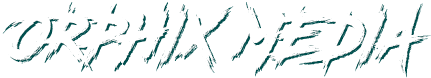
<style>
.page{position:relative;width:431px;height:78px;background:#ffffff}
.page>*{position:absolute;margin:0}
.t1{font:63px "RoadRage";color:#ffffff;scale:0.93 1}
</style>
<div class="page">
<p class="t1" style="left:2px;top:2px;width:429px;height:76px">ORPHIX MEDIA</p>
</div>
